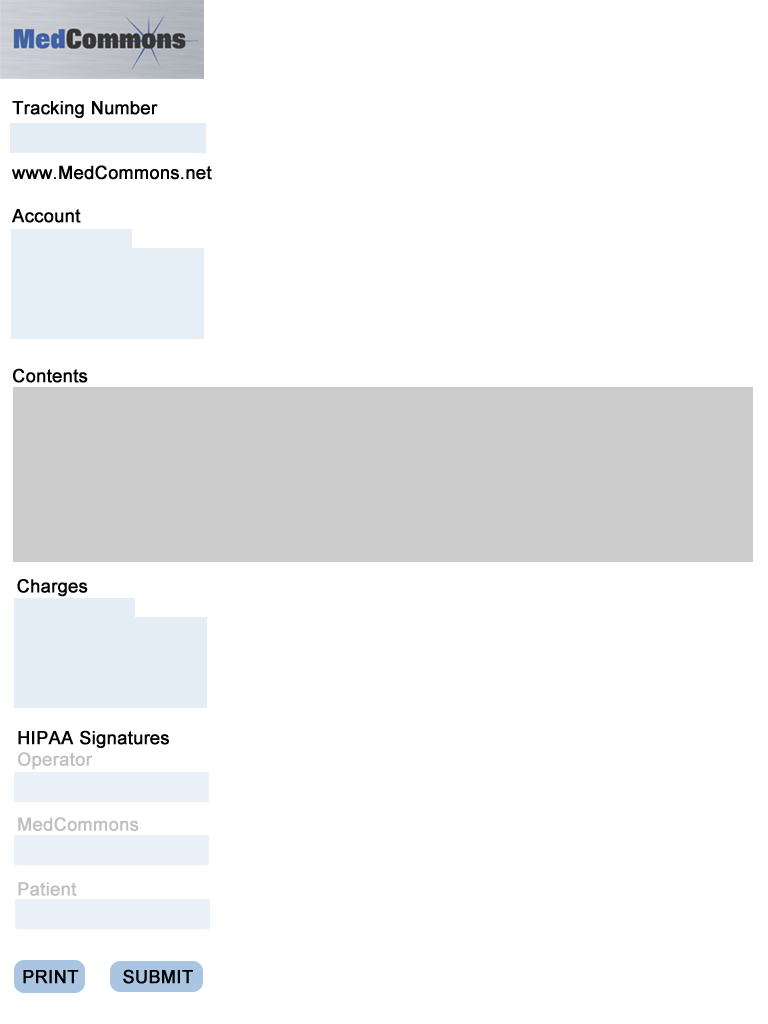
<style>
.page{position:relative;width:768px;height:1024px;background:#ffffff}
.page>*{position:absolute;margin:0}
.t1{font:18px "ArialMT";color:#000000;font-weight:bold}
.t2{font:18px "ArialMT";font-weight:bold}
</style>
<div class="page">
<p class="t1" style="left:12px;top:101px;width:200px;height:122px">Tracking Number<br><br><br>www.MedCommons.net<br><br>Account</p>
<p class="t1" style="left:13px;top:368px;width:75px;height:15px">Contents</p>
<p class="t1" style="left:17px;top:579px;width:71px;height:18px">Charges</p>
<p class="t2" style="left:18px;top:730px;width:151px;height:166px">HIPAA Signatures<br>Operator<br><br><br>MedCommons<br><br><br>Patient</p>
</div>
